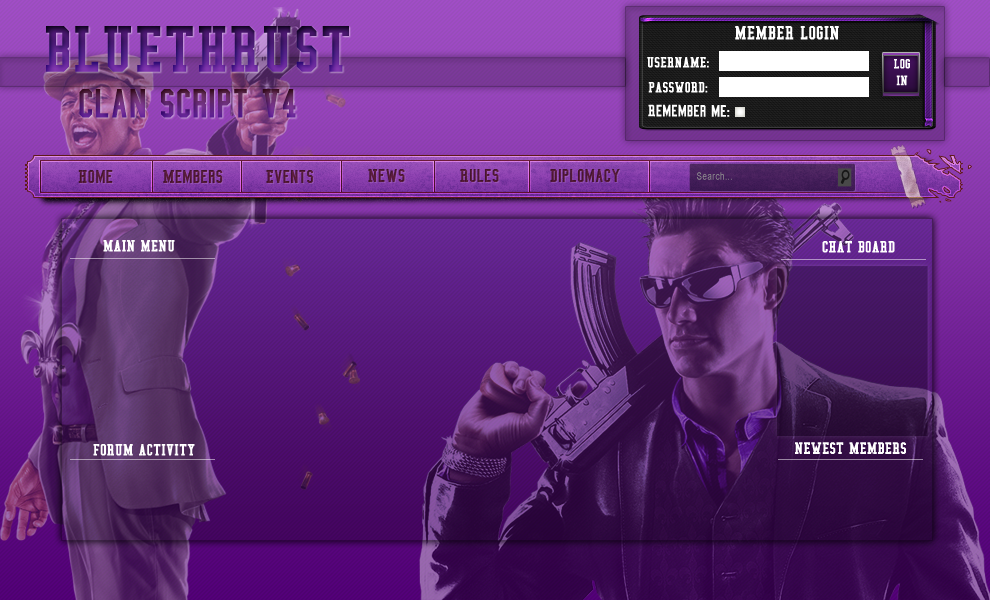
<style>
.page{position:relative;width:990px;height:600px}
.page>*{position:absolute;margin:0}
.t1{font:66.7px "CollegeCondensed"}
.t2{font:19.4px "CollegeCondensed";color:#ffffff}
.t3{font:15.3px "CollegeCondensed";color:#ffffff}
.t4{font:13.9px "CollegeCondensed";color:#ffffff}
.t5{font:41.7px "CollegeCondensed"}
.t6{font:16.7px "CollegeCondensed";color:#ffffff}
.t7{font:19.4px "CollegeCondensed";color:#501836}
.t8{font:14px "CollegeCondensed";color:#501836}
.t9{font:19.4px "CollegeCondensed";color:#511937}
.t10{font:19.4px "CollegeCondensed";color:#541938}
.t11{font:19.4px "CollegeCondensed";color:#4e1834}
.t12{font:19.4px "CollegeCondensed";color:#4c1733}
.t13{font:10.4px "ArialMT";letter-spacing:0.05em;color:#919191;scale:0.78 1}
</style>
<div class="page">
<p class="t1" style="left:46px;top:26px;width:303px;height:46px">BLUETHRUST</p>
<p class="t2" style="left:735px;top:26px;width:104px;height:14px">MEMBER LOGIN</p>
<p class="t3" style="left:647px;top:57px;width:62px;height:11px;text-align:center">USERNAME:<br>;<br>ll</p>
<p class="t4" style="left:894px;top:59px;width:16px;height:27px;text-align:center">LOG<br>IN</p>
<p class="t5" style="left:79px;top:89px;width:217px;height:29px">Clan Script V4</p>
<p class="t3" style="left:648px;top:82px;width:60px;height:11px">PASSWORD:</p>
<p class="t6" style="left:648px;top:104px;width:82px;height:13px">Remember me:</p>
<p class="t7" style="left:78px;top:170px;width:35px;height:13px"><span class="t8">   </span>  Home</p>
<p class="t9" style="left:163px;top:170px;width:60px;height:13px">Members</p>
<p class="t9" style="left:266px;top:170px;width:47px;height:13px">Events</p>
<p class="t10" style="left:368px;top:169px;width:37px;height:13px">News</p>
<p class="t11" style="left:460px;top:169px;width:39px;height:13px">Rules</p>
<p class="t12" style="left:550px;top:169px;width:70px;height:13px">Diplomacy</p>
<p class="t13" style="left:697px;top:172px;width:35px;height:8px">Search...</p>
<p class="t6" style="left:103px;top:240px;width:72px;height:12px">MAIN MENU</p>
<p class="t6" style="left:822px;top:241px;width:73px;height:12px">CHAT BOARD</p>
<p class="t6" style="left:93px;top:444px;width:102px;height:12px">FORUM ACTIVITY</p>
<p class="t6" style="left:795px;top:442px;width:111px;height:12px">NEWEST MEMBERS</p>
</div>
